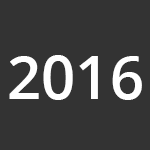
<style>
.page{position:relative;width:150px;height:150px;background:#333333}
.page>*{position:absolute;margin:0}
.t1{font:60px "OpenSans-Semibold";color:#ffffff}
</style>
<div class="page">
<p class="t1" style="left:9px;top:55px;width:133px;height:45px">2016</p>
</div>
